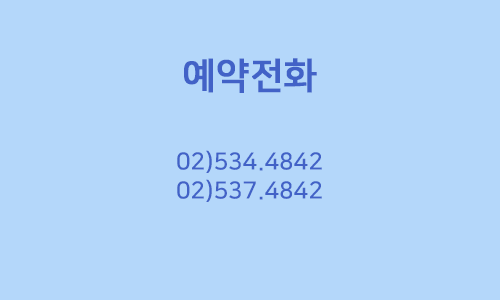
<style>
.page{position:relative;width:500px;height:300px;background:#b4d7fa}
.page>*{position:absolute;margin:0}
.t1{font:36.5px "NanumSquareB";color:#4262c7;font-weight:bold}
.t2{font:23.8px "NanumSquareB";color:#4262c7}
</style>
<div class="page">
<p class="t1" style="left:184px;top:58px;width:133px;height:35px">예약전화</p>
<p class="t2" style="left:177px;top:150px;width:145px;height:52px">02)534.4842<br>02)537.4842</p>
</div>
